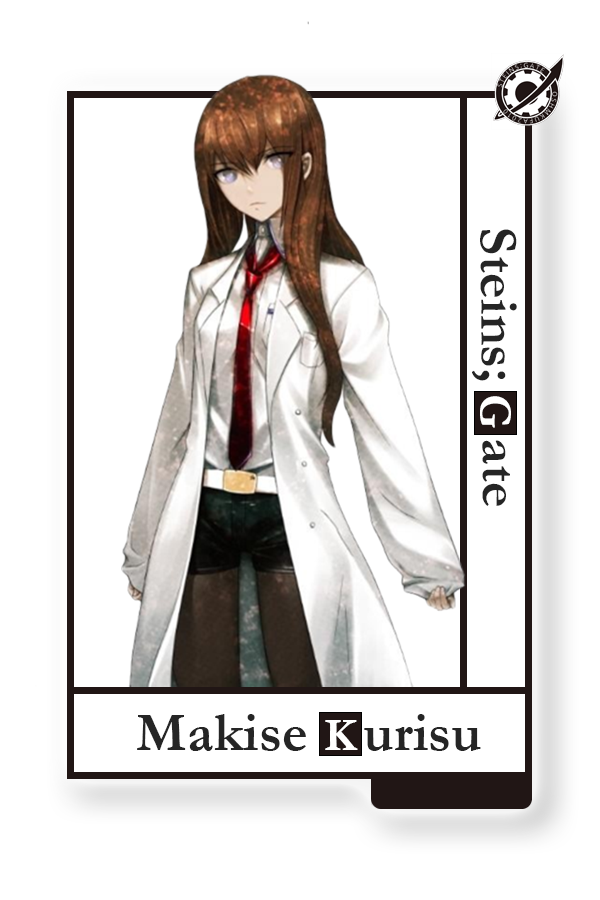
<style>
.page{position:relative;width:600px;height:900px;background:#ffffff}
.page>*{position:absolute;margin:0}
.t1{font:55.4px "Garamond-Bold";color:#252525}
.t2{font:47px "Garamond-Bold";color:#ffffff}
</style>
<div class="page">
<p class="t1" style="left:472px;top:229px;width:45px;height:277px;rotate:89deg">Steins;    ate</p>
<p class="t2" style="left:480px;top:396px;width:31px;height:32px;rotate:90deg">G</p>
<p class="t1" style="left:137px;top:714px;width:344px;height:37px">Makise    urisu</p>
<p class="t2" style="left:325px;top:720px;width:33px;height:30px">K</p>
</div>
